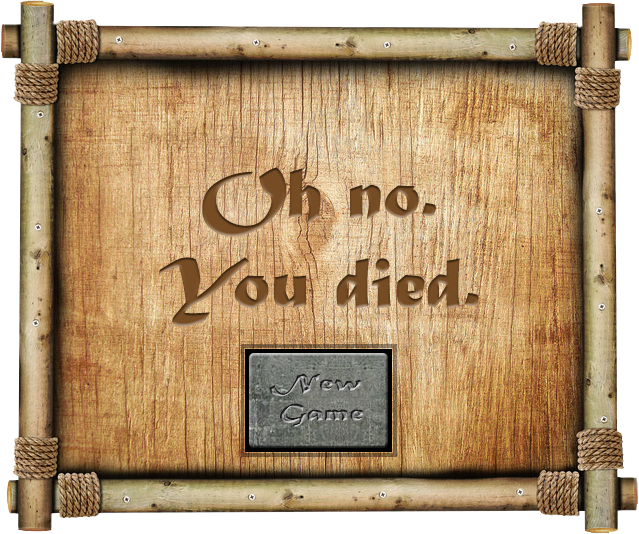
<style>
.page{position:relative;width:639px;height:534px}
.page>*{position:absolute;margin:0}
.t1{font:75px "MaturaMTScriptCapitals";color:#754c24}
</style>
<div class="page">
<p class="t1" style="left:158px;top:167px;width:321px;height:160px;text-align:center">Oh no.<br>You died.</p>
</div>
